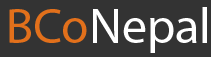
<style>
.page{position:relative;width:211px;height:57px;background:#333333}
.page>*{position:absolute;margin:0}
.t1{font:50px "MyriadPro-Regular";color:#ffffff}
.t2{font:50px "MyriadPro-Regular";color:#e2701b}
</style>
<div class="page">
<p class="t1" style="left:9px;top:7px;width:198px;height:46px"><span class="t2">BCo</span>Nepal</p>
</div>
